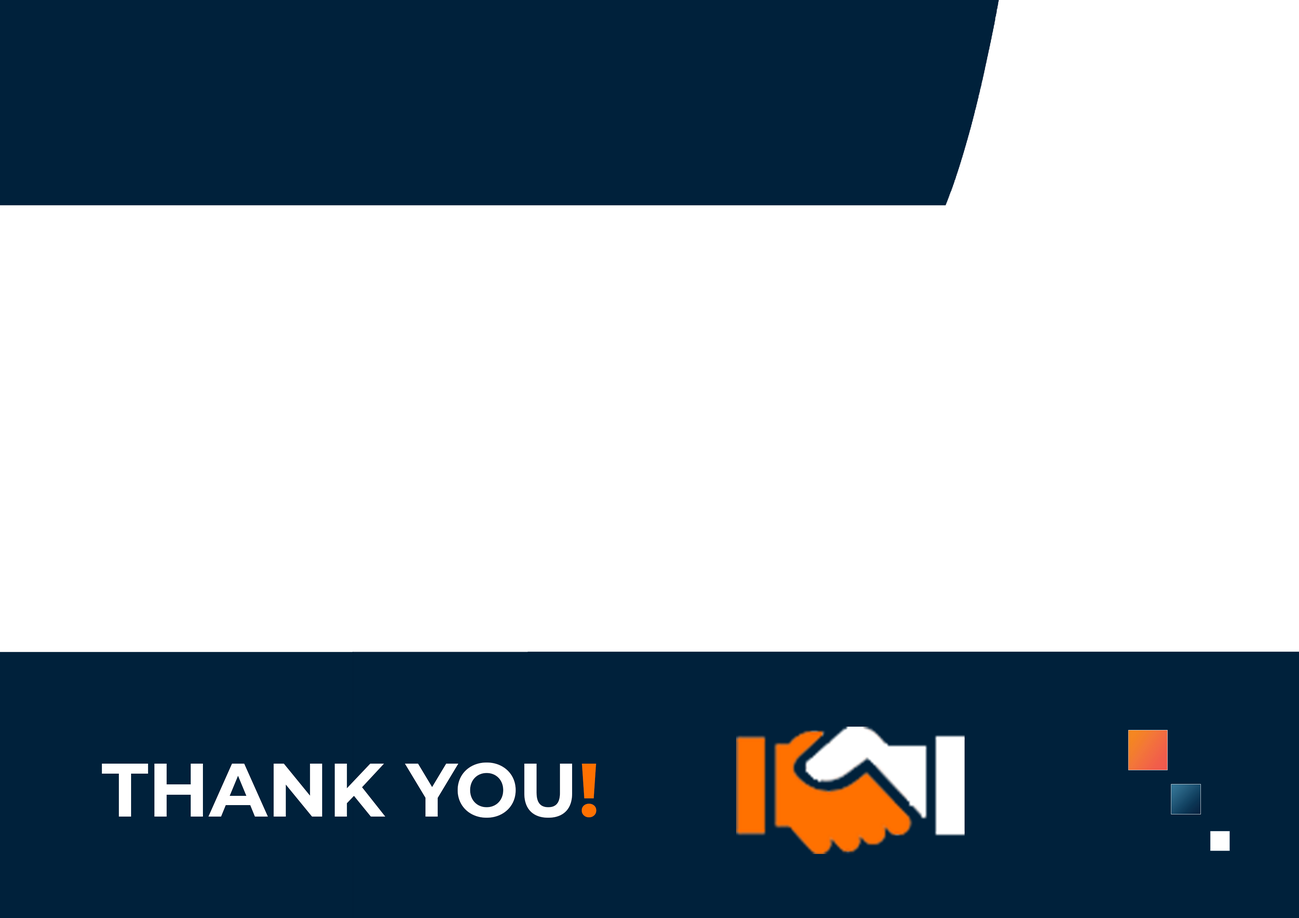
<style>
.page{position:relative;width:1299px;height:918px;background:#ffffff}
.page>*{position:absolute;margin:0}
.t1{font:75.6px "Montserrat-Bold";color:#ffffff}
.t2{font:75.6px "Montserrat-Bold";color:#ff7100}
</style>
<div class="page">
<p class="t1" style="left:102px;top:763px;width:494px;height:55px">THANK YOU<span class="t2">!</span></p>
</div>
